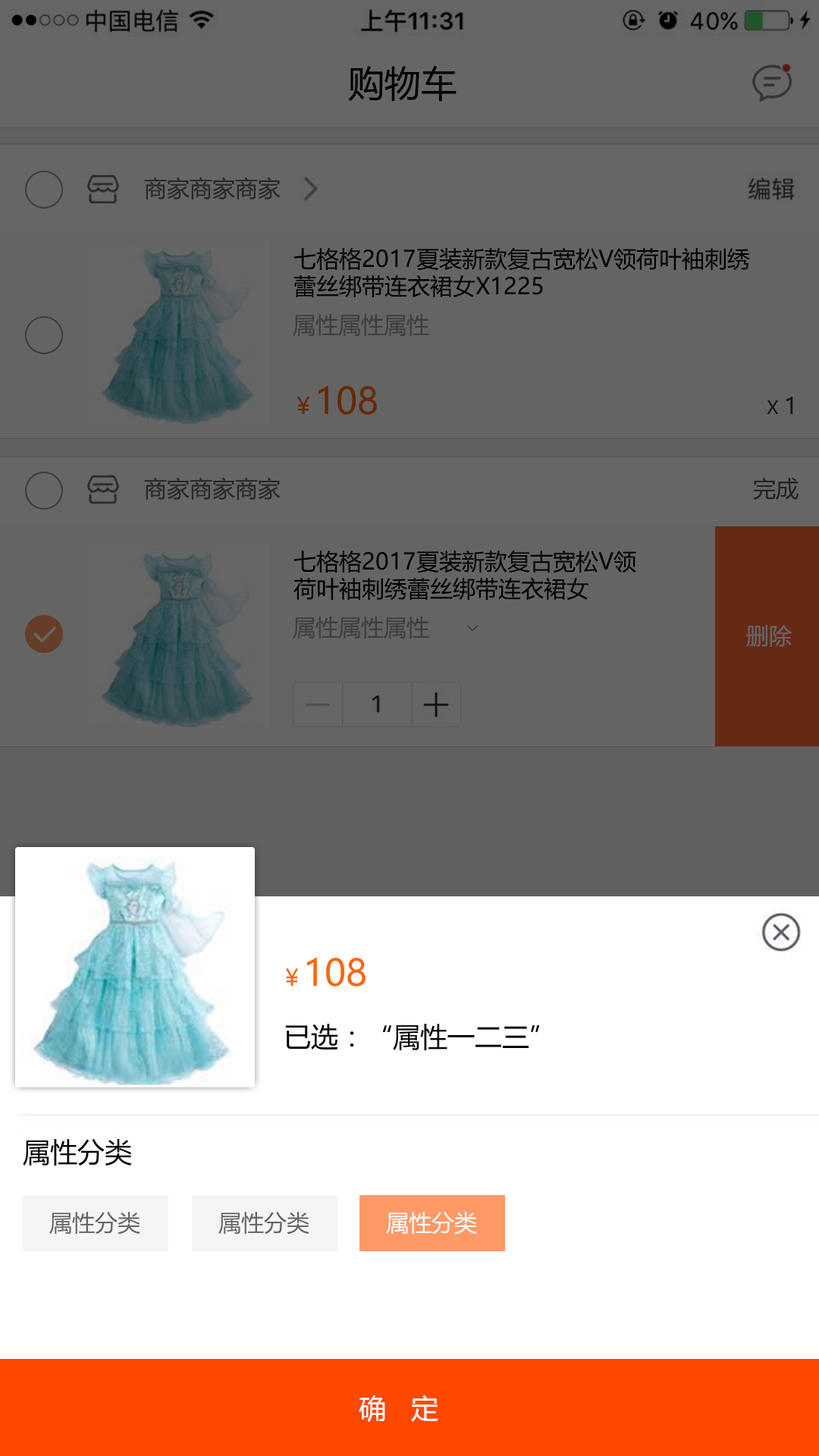
<style>
.page{position:relative;width:819px;height:1456px;background:#ffffff}
.page>*{position:absolute;margin:0}
.t1{font:36.4px "MicrosoftYaHei";color:#000000}
.t2{font:22.7px "MicrosoftYaHei";color:#292929}
.t3{font:22.7px/27.3px "MicrosoftYaHei";color:#000000}
.t4{font:22.7px "MicrosoftYaHei";color:#3d3d3d}
.t5{font:36.4px "MicrosoftYaHei";color:#662900}
.t6{font:22.7px "MicrosoftYaHei";color:#662900}
.t7{font:18.2px "MicrosoftYaHei";color:#141414}
.t8{font:22.7px "MicrosoftYaHei";color:#141414}
.t9{font:22.7px "MicrosoftYaHei";color:#202224}
.t10{font:22.7px "MicrosoftYaHei";color:#3d3d3d;scale:0.5 1}
.t11{font:22.7px "MicrosoftYaHei";color:#666666}
.t12{font:36.4px "MicrosoftYaHei";color:#ff6600}
.t13{font:22.7px "MicrosoftYaHei";color:#ff6600}
.t14{font:27.3px "MicrosoftYaHei";color:#000000}
.t15{font:22.7px "MicrosoftYaHei";color:#ffffff}
.t16{font:27.3px "MicrosoftYaHei";color:#ffffff}
</style>
<div class="page">
<p class="t1" style="left:348px;top:65px;width:109px;height:37px">购物车</p>
<p class="t2" style="left:144px;top:177px;width:137px;height:22px">商家商家商家</p>
<p class="t3" style="left:293px;top:248px;width:457px;height:49px">七格格2017夏装新款复古宽松V领荷叶袖刺绣蕾丝绑带连衣裙女X1225</p>
<p class="t4" style="left:293px;top:314px;width:136px;height:22px">属性属性属性</p>
<p class="t5" style="left:297px;top:385px;width:80px;height:30px"><span class="t6">￥</span>108</p>
<p class="t7" style="left:767px;top:396px;width:26px;height:18px">X <span class="t8">1</span></p>
<p class="t2" style="left:144px;top:477px;width:137px;height:23px">商家商家商家</p>
<p class="t9" style="left:753px;top:478px;width:46px;height:22px">完成</p>
<p class="t3" style="left:293px;top:551px;width:343px;height:49px">七格格2017夏装新款复古宽松V领荷叶袖刺绣蕾丝绑带连衣裙女X1225</p>
<p class="t4" style="left:293px;top:617px;width:136px;height:22px">属性属性属性</p>
<p class="t10" style="left:466px;top:626px;width:13px;height:6px;rotate:90deg">&gt;</p>
<p class="t11" style="left:746px;top:625px;width:46px;height:22px">删除</p>
<p class="t12" style="left:285px;top:957px;width:81px;height:30px"><span class="t13">￥</span>108</p>
<p class="t14" style="left:285px;top:1024px;width:255px;height:26px">已选：“属性一二三”</p>
<p class="t14" style="left:23px;top:1139px;width:109px;height:27px">属性分类</p>
<p class="t11" style="left:49px;top:1212px;width:91px;height:23px">属性分类</p>
<p class="t11" style="left:218px;top:1212px;width:91px;height:23px">属性分类</p>
<p class="t15" style="left:386px;top:1212px;width:91px;height:23px">属性分类</p>
<p class="t16" style="left:359px;top:1395px;width:79px;height:27px">确   定</p>
</div>
